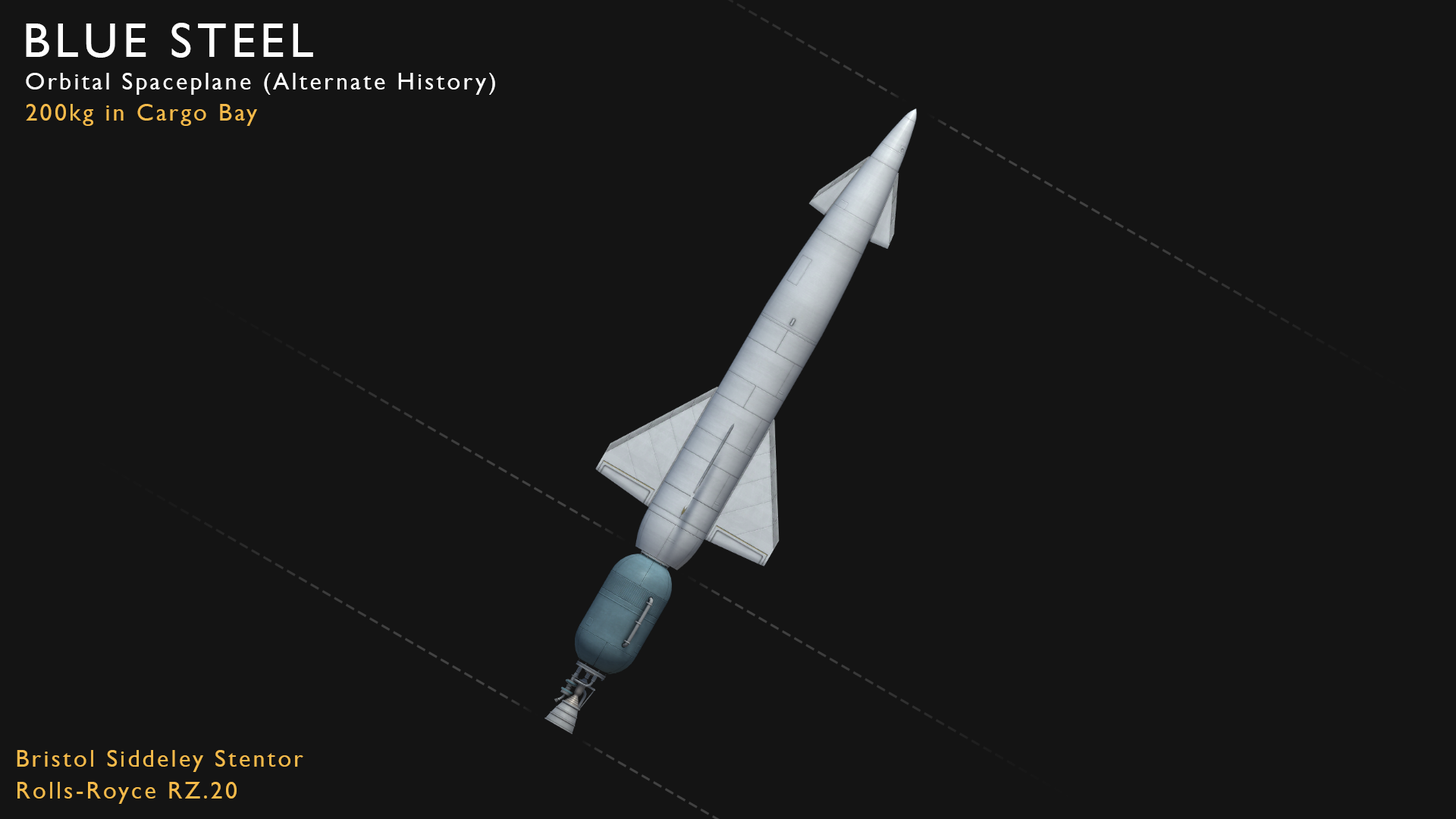
<style>
.page{position:relative;width:1456px;height:819px;background:#141414}
.page>*{position:absolute;margin:0}
.t1{font:48.5px "GillSansMT";letter-spacing:0.1em;color:#ffffff}
.t2{font:24.3px "GillSansMT";letter-spacing:0.1em;color:#ffffff}
.t3{font:24.3px "GillSansMT";letter-spacing:0.1em;color:#f4ba4a}
</style>
<div class="page">
<p class="t1" style="left:26px;top:23px;width:287px;height:35px">BLUE STEEL</p>
<p class="t2" style="left:26px;top:73px;width:469px;height:22px">Orbital Spaceplane (Alternate History)</p>
<p class="t3" style="left:26px;top:104px;width:231px;height:22px">200kg in Cargo Bay</p>
<p class="t3" style="left:17px;top:750px;width:286px;height:22px">Bristol Siddeley Stentor</p>
<p class="t3" style="left:17px;top:782px;width:220px;height:22px">Rolls-Royce RZ.20</p>
</div>
